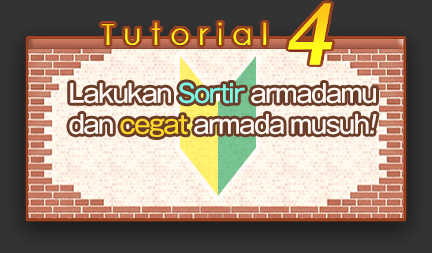
<style>
.page{position:relative;width:432px;height:253px}
.page>*{position:absolute;margin:0}
.t1{font:25px/40px "GothicMB101Pro-Medium";letter-spacing:-0.06em;color:#fff8f3;scale:0.95 1}
.t2{font:25px/40px "GothicMB101Pro-Medium";letter-spacing:-0.06em;color:#7afbe7;scale:0.95 1}
.t3{font:25px/40px "GothicMB101Pro-Medium";letter-spacing:-0.06em;color:#ffd929;scale:0.95 1}
.t4{font:25px/40px "GothicMB101Pro-Medium";letter-spacing:-0.06em;color:#fff8f3;font-style:italic;scale:0.95 1}
</style>
<div class="page">
<p class="t1" style="left:69px;top:82px;width:308px;height:55px">Lakukan <span class="t2">Sortir </span>armadamu <br>dan <span class="t3">cegat </span>armada musuh<span class="t4">!</span></p>
</div>
